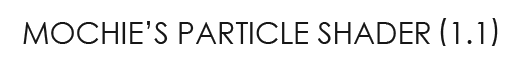
<style>
.page{position:relative;width:512px;height:64px;background:#ffffff}
.page>*{position:absolute;margin:0}
.t1{font:30px "CenturyGothic";color:#161616}
</style>
<div class="page">
<p class="t1" style="left:23px;top:21px;width:461px;height:23px">MOCHIE’S PARTICLE SHADER  1.1</p>
</div>
